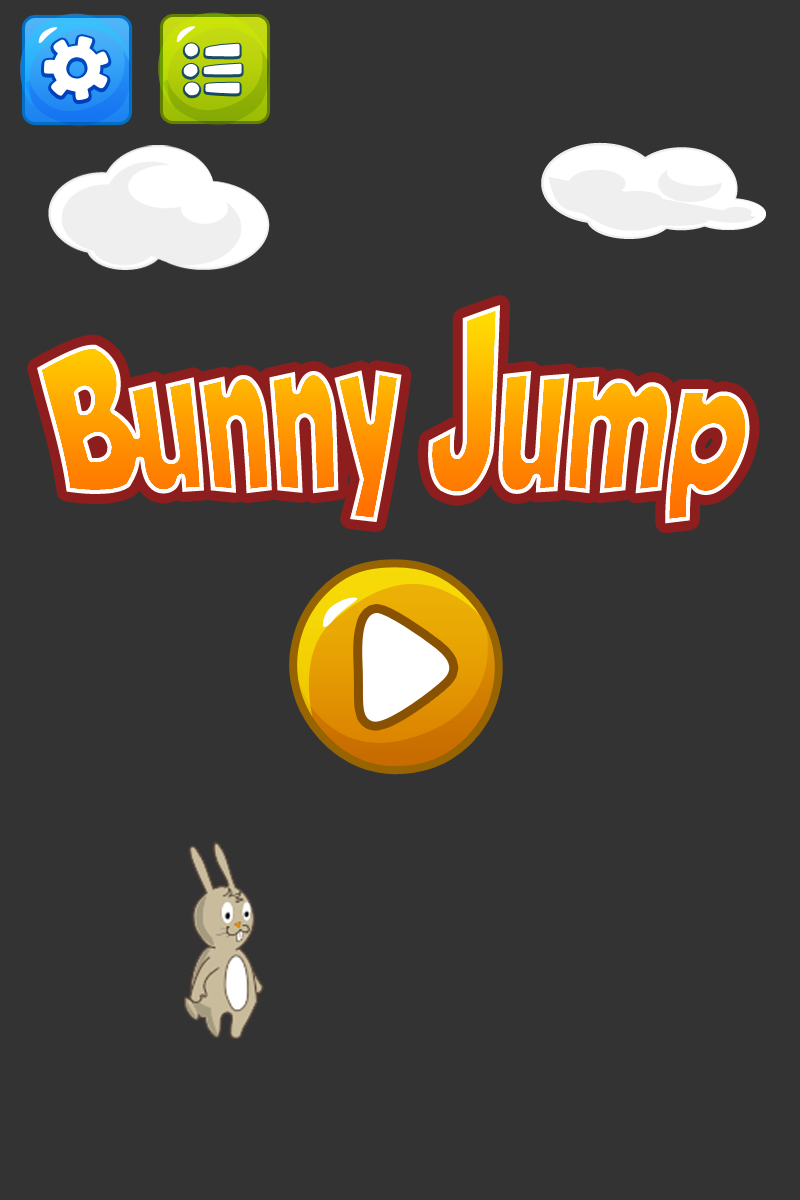
<style>
.page{position:relative;width:800px;height:1200px;background:#333333}
.page>*{position:absolute;margin:0}
.t1{font:165.7px "GROBOLD";letter-spacing:-0.02em;scale:0.7 1}
</style>
<div class="page">
<p class="t1" style="left:37px;top:305px;width:713px;height:219px">Bunny Jump</p>
</div>
